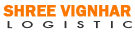
<style>
.page{position:relative;width:135px;height:34px;background:#ffffff}
.page>*{position:absolute;margin:0}
.t1{font:16px "FranklinGothic-Demi";color:#fc7700;text-transform:uppercase;font-weight:bold;scale:1.04 1}
.t2{font:8.5px "Futura-Book-Regular";letter-spacing:0.2em;color:#323232;text-transform:uppercase;font-weight:bold;scale:1.53 1}
</style>
<div class="page">
<p class="t1" style="left:3px;top:5px;width:128px;height:12px">Shree Vignhar</p>
<p class="t2" style="left:7px;top:21px;width:125px;height:8px">L o g i s t i c</p>
</div>
